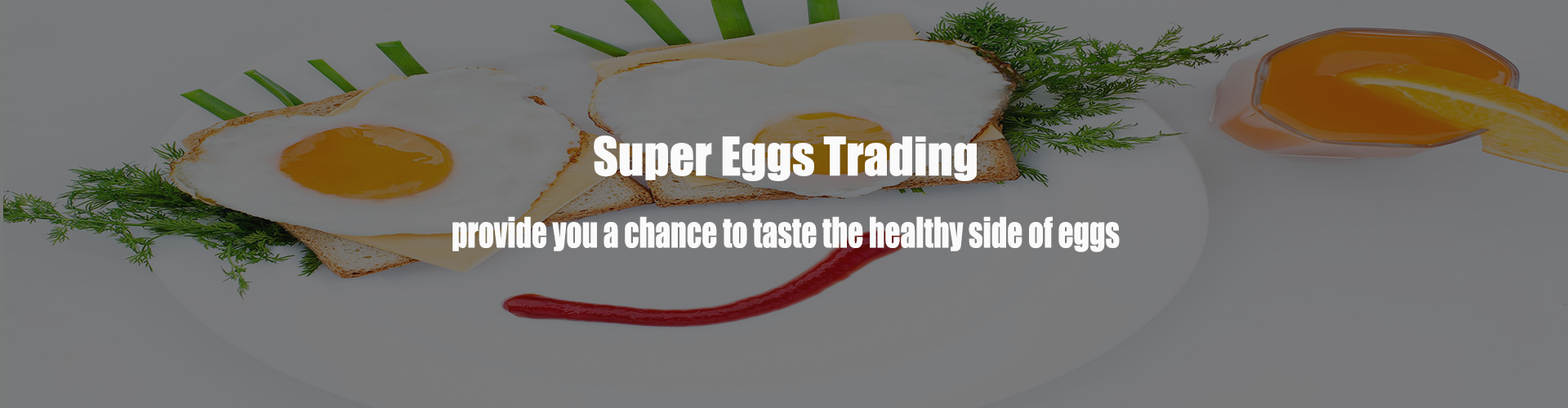
<style>
.page{position:relative;width:1568px;height:408px}
.page>*{position:absolute;margin:0}
.t1{font:49.3px "Impact";color:#fafafa}
.t2{font:38.6px "Impact";color:#fafafa;scale:0.79 1}
</style>
<div class="page">
<p class="t1" style="left:594px;top:136px;width:383px;height:45px">Super Eggs Trading</p>
<p class="t2" style="left:452px;top:216px;width:668px;height:36px">provide you a chance to taste the healthy side of eggs</p>
</div>
